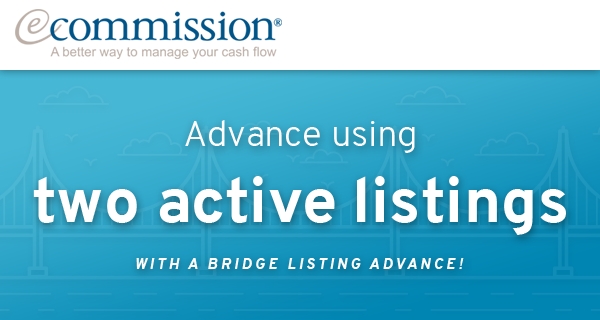
<style>
.page{position:relative;width:600px;height:320px;background:#ffffff}
.page>*{position:absolute;margin:0}
.t1{font:36.7px "Overpass-Light";color:#ffffff}
.t2{font:63.5px "Overpass-Bold";color:#ffffff}
.t3{font:15px "Overpass-BoldItalic";letter-spacing:0.2em;color:#ffffff;text-transform:uppercase}
</style>
<div class="page">
<p class="t1" style="left:185px;top:120px;width:230px;height:33px">Advance using</p>
<p class="t2" style="left:33px;top:176px;width:533px;height:59px">two active listings</p>
<p class="t3" style="left:136px;top:258px;width:328px;height:11px">with a bridge listing advance!</p>
</div>
